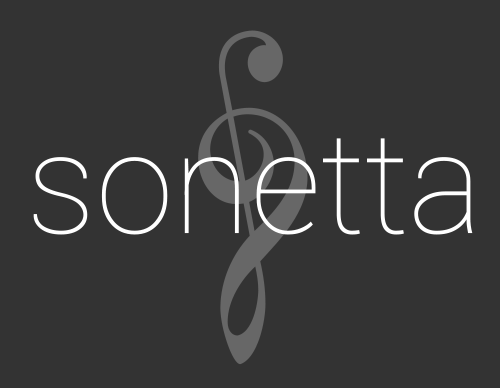
<style>
.page{position:relative;width:500px;height:388px;background:#333333}
.page>*{position:absolute;margin:0}
.t1{font:140.8px "Roboto-Thin";color:#ffffff}
</style>
<div class="page">
<p class="t1" style="left:33px;top:138px;width:440px;height:97px">sonetta</p>
</div>
